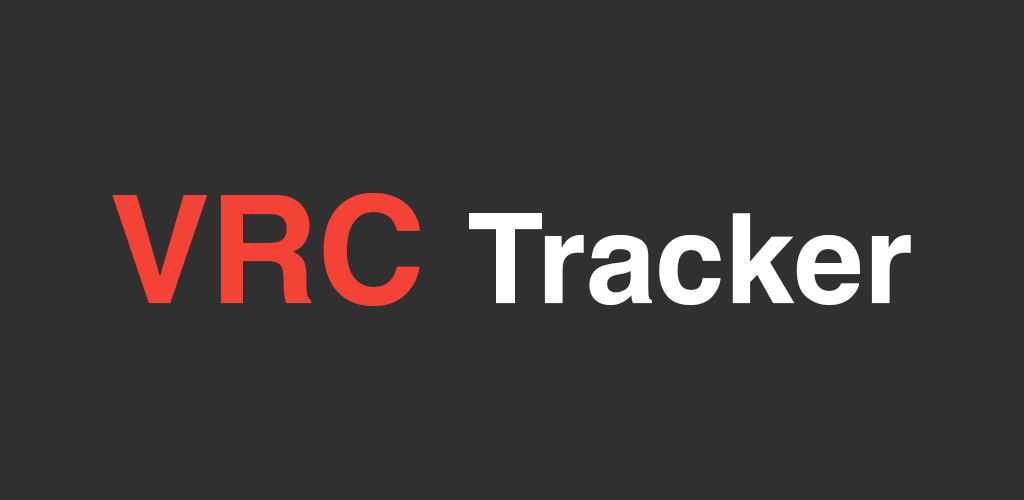
<style>
.page{position:relative;width:1024px;height:500px;background:#303030}
.page>*{position:absolute;margin:0}
.t1{font:125px "Helvetica-Bold";color:#ffffff}
.t2{font:150px "Helvetica-Bold";color:#f44336}
</style>
<div class="page">
<p class="t1" style="left:112px;top:193px;width:799px;height:113px"><span class="t2">VRC </span>Tracker</p>
</div>
